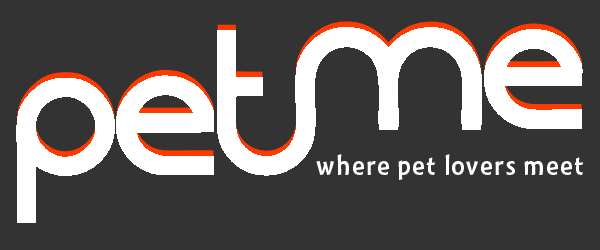
<style>
.page{position:relative;width:600px;height:250px;background:#333333}
.page>*{position:absolute;margin:0}
.t1{font:28px "Montara-Gothic";letter-spacing:0.05em;color:#ffffff}
</style>
<div class="page">
<p class="t1" style="left:316px;top:154px;width:268px;height:26px">where pet lovers meet</p>
</div>
